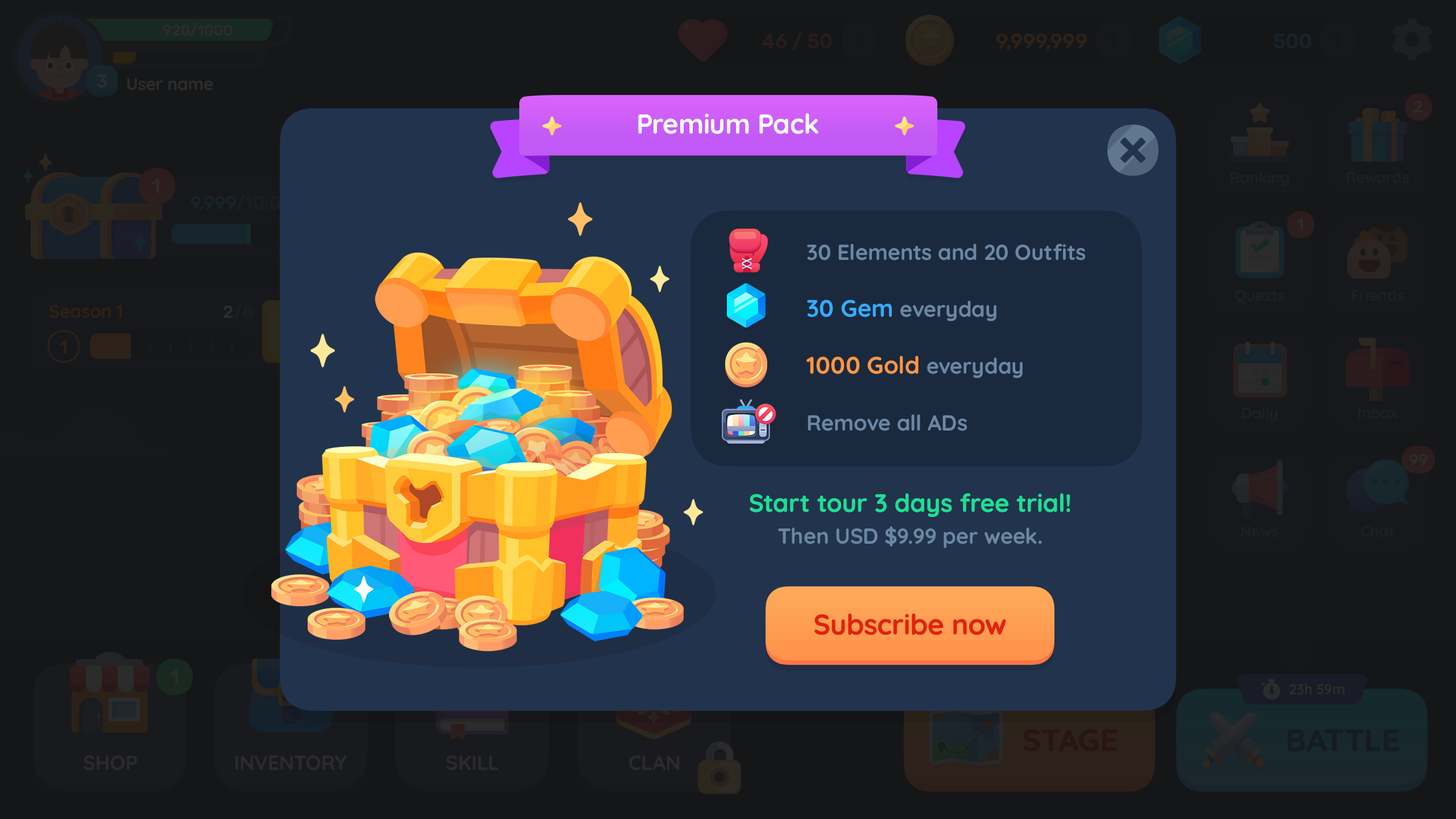
<style>
.page{position:relative;width:1456px;height:819px;background:#151719}
.page>*{position:absolute;margin:0}
.t1{font:27.3px "Quicksand-Bold";letter-spacing:-0.01em;color:#ffffff}
.t2{font:21.6px "Quicksand-Bold";color:#6b87a3}
.t3{font:23.9px "Quicksand-Bold";color:#34adfc}
.t4{font:23.9px "Quicksand-Bold";color:#fd9744}
.t5{font:25px "Quicksand-Bold";color:#1fde93}
.t6{font:28.4px "Quicksand-Bold";letter-spacing:-0.01em;color:#e1220c}
</style>
<div class="page">
<p class="t1" style="left:638px;top:113px;width:180px;height:21px">Premium Pack</p>
<p class="t2" style="left:807px;top:243px;width:278px;height:17px">30 Elements and 20 Outfits</p>
<p class="t2" style="left:807px;top:300px;width:189px;height:21px"><span class="t3">30 Gem </span>everyday</p>
<p class="t4" style="left:806px;top:355px;width:217px;height:23px">1000 Gold <span class="t2">everyday</span></p>
<p class="t2" style="left:808px;top:414px;width:159px;height:17px">Remove all ADs</p>
<p class="t5" style="left:750px;top:493px;width:320px;height:24px">Start tour 3 days free trial!</p>
<p class="t2" style="left:778px;top:526px;width:264px;height:22px">Then USD $9.99 per week.</p>
<p class="t6" style="left:814px;top:613px;width:192px;height:22px">Subscribe now</p>
</div>
